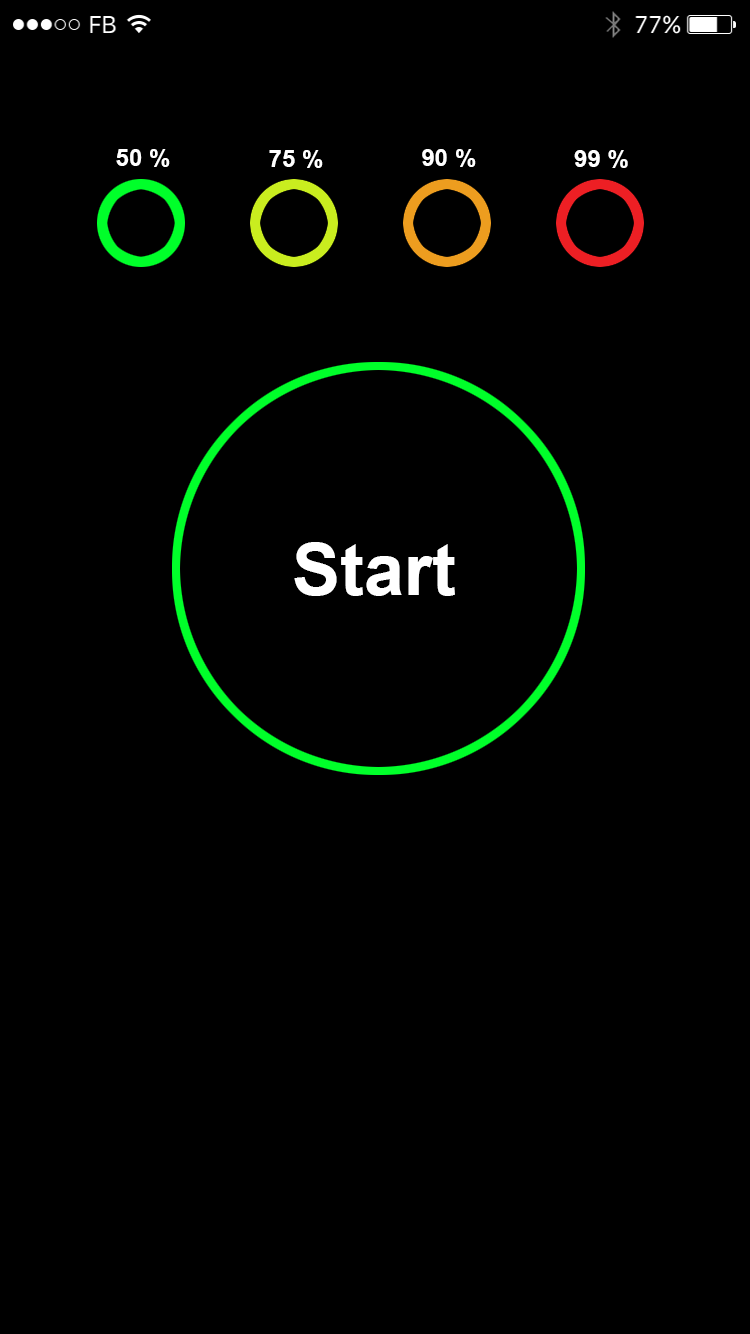
<style>
.page{position:relative;width:750px;height:1334px;background:#000000}
.page>*{position:absolute;margin:0}
.t1{font:24px "Arial-BoldMT";color:#ffffff}
.t2{font:72px "Arial-BoldMT";color:#ffffff}
</style>
<div class="page">
<p class="t1" style="left:116px;top:149px;width:54px;height:18px">50 %</p>
<p class="t1" style="left:269px;top:150px;width:54px;height:18px">75 %</p>
<p class="t1" style="left:422px;top:149px;width:54px;height:18px">90 %</p>
<p class="t1" style="left:574px;top:150px;width:54px;height:18px">99 %</p>
<p class="t2" style="left:294px;top:542px;width:161px;height:54px">Start</p>
</div>
